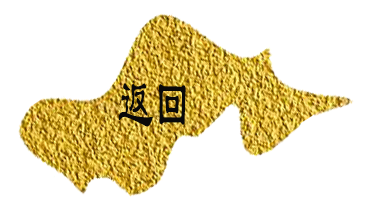
<style>
.page{position:relative;width:371px;height:218px;background:#ffffff}
.page>*{position:absolute;margin:0}
.t1{font:72px "LiSu";letter-spacing:0.02em;color:#0a0909;scale:0.5 1}
</style>
<div class="page">
<p class="t1" style="left:118px;top:83px;width:68px;height:44px">返回</p>
</div>
